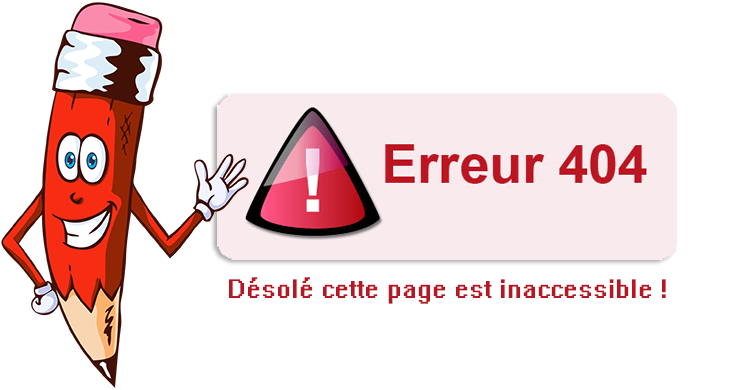
<style>
.page{position:relative;width:750px;height:390px;background:#ffffff}
.page>*{position:absolute;margin:0}
.t1{font:24px "System";color:#b91623}
</style>
<div class="page">
<p class="t1" style="left:229px;top:277px;width:437px;height:27px">Désolé cette page est inaccessible !</p>
</div>
